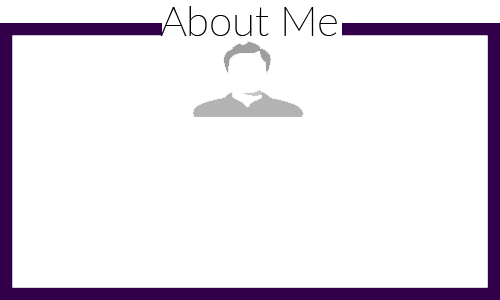
<style>
.page{position:relative;width:500px;height:300px;background:#ffffff}
.page>*{position:absolute;margin:0}
.t1{font:10px "Lato-Thin";color:#000000}
</style>
<div class="page">
<p class="t1" style="left:160px;top:6px;width:177px;height:30px">About Me</p>
</div>
